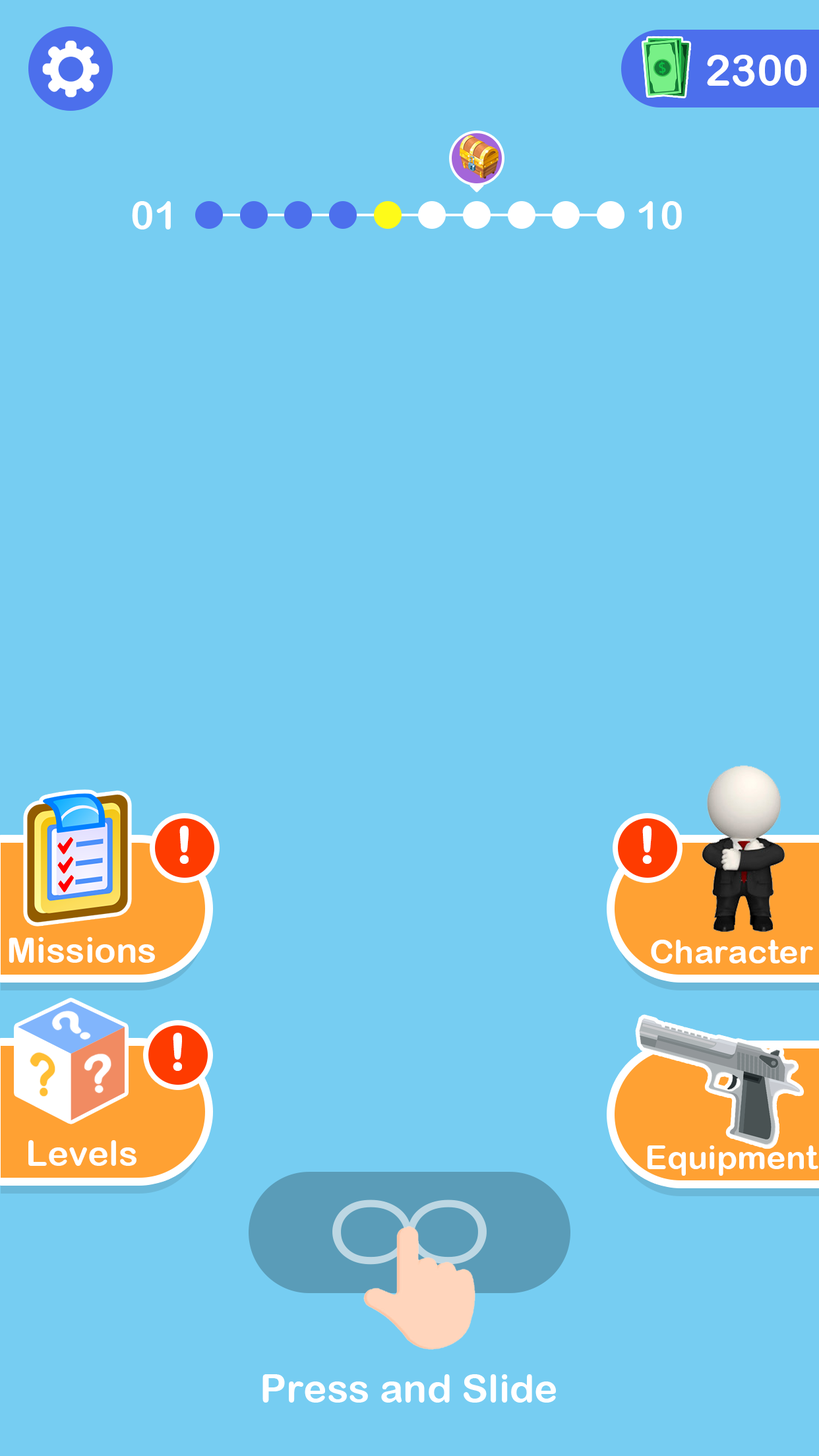
<style>
.page{position:relative;width:819px;height:1456px;background:#76cdf2}
.page>*{position:absolute;margin:0}
.t1{font:43.5px "ArialRoundedMTBold";color:#ffffff}
.t2{font:39.6px "ArialRoundedMTBold";color:#ffffff}
.t3{font:49.5px "ArialRoundedMTBold";color:#ffffff;font-weight:bold}
.t4{font:35.6px "ArialRoundedMTBold";color:#ffffff}
.t5{font:33px "ArialRoundedMTBold";color:#ffffff}
</style>
<div class="page">
<p class="t1" style="left:707px;top:55px;width:100px;height:31px">2300</p>
<p class="t2" style="left:132px;top:201px;width:39px;height:28px">01</p>
<p class="t2" style="left:638px;top:201px;width:44px;height:28px">10</p>
<p class="t3" style="left:179px;top:826px;width:10px;height:38px">!</p>
<p class="t3" style="left:642px;top:826px;width:9px;height:38px">!</p>
<p class="t4" style="left:9px;top:937px;width:146px;height:26px">Missions</p>
<p class="t5" style="left:651px;top:940px;width:162px;height:23px">Character</p>
<p class="t3" style="left:173px;top:1033px;width:9px;height:38px">!</p>
<p class="t4" style="left:28px;top:1140px;width:108px;height:26px">Levels</p>
<p class="t5" style="left:647px;top:1145px;width:171px;height:31px">Equipment</p>
<p class="t2" style="left:262px;top:1374px;width:294px;height:29px">Press and Slide</p>
</div>
